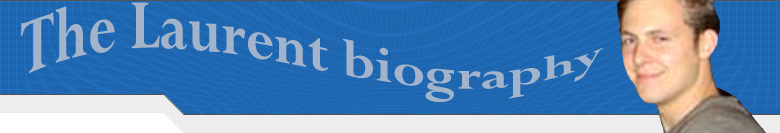
<style>
.page{position:relative;width:780px;height:133px}
.page>*{position:absolute;margin:0}
.t1{font:60px "Perpetua-Bold";color:#a2b3ca}
</style>
<div class="page">
<p class="t1" style="left:21px;top:2px;width:582px;height:100px">The Laurent biography</p>
</div>
